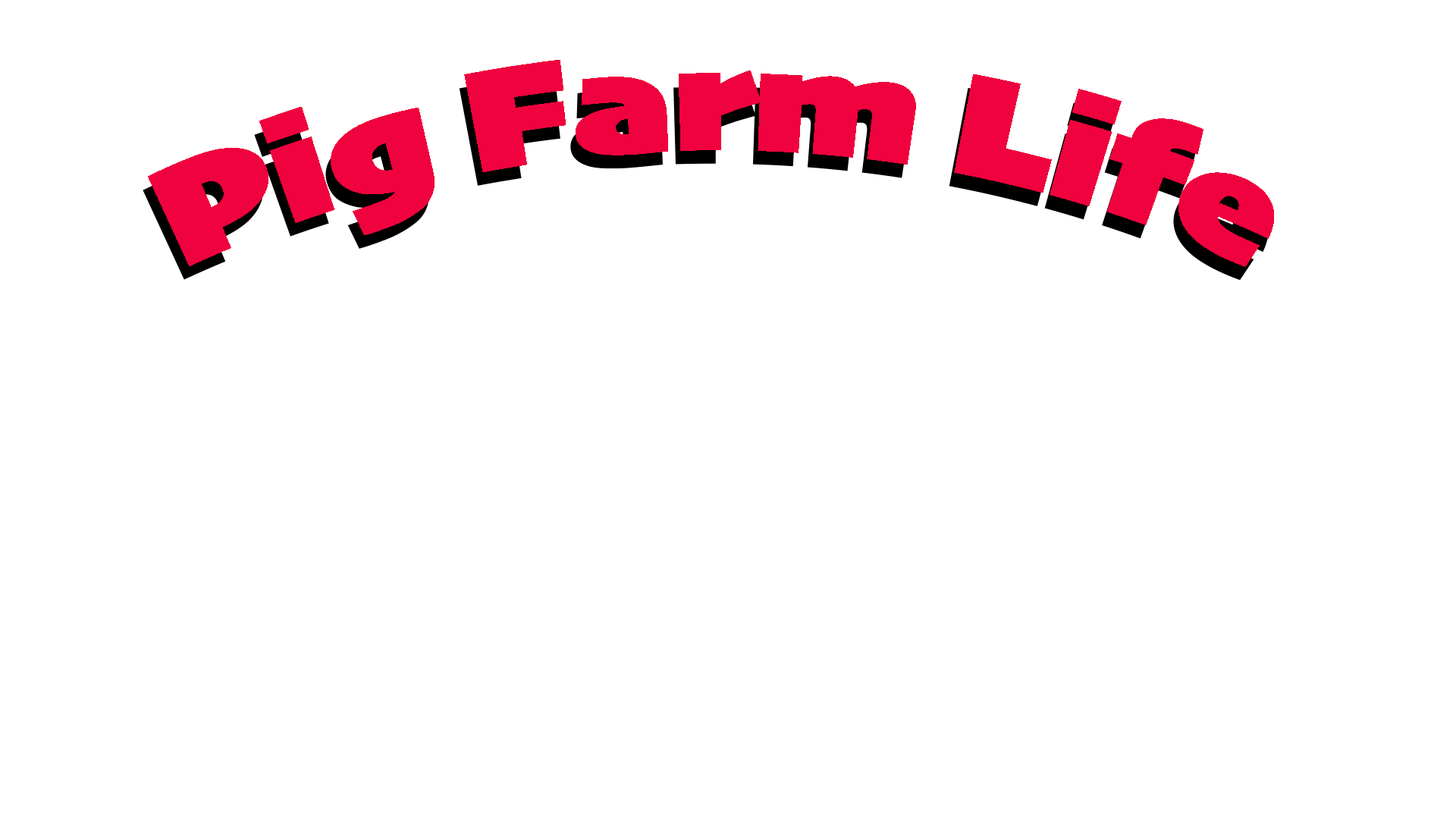
<style>
.page{position:relative;width:1456px;height:819px;background:#ffffff}
.page>*{position:absolute;margin:0}
.t1{font:151.7px "Skia-Black";color:#ef023d;font-style:italic}
</style>
<div class="page">
<p class="t1" style="left:143px;top:74px;width:1126px;height:207px">Pig Farm Life</p>
</div>
